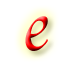
<style>
.page{position:relative;width:70px;height:70px;background:#ffffff}
.page>*{position:absolute;margin:0}
.t1{font:72px "Apple-Chancery"}
</style>
<div class="page">
<p class="t1" style="left:25px;top:16px;width:23px;height:35px">e</p>
</div>
